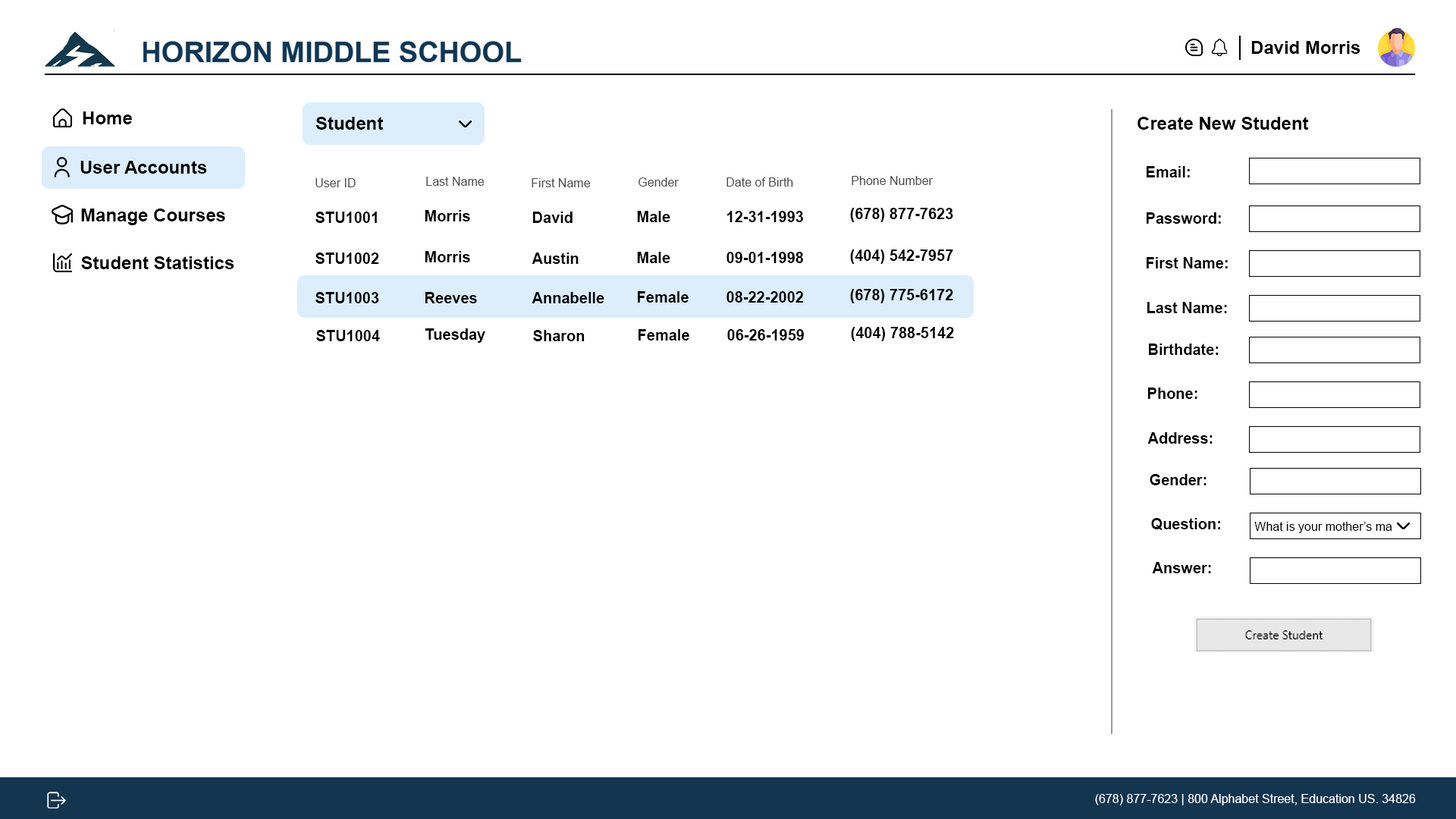
<style>
.page{position:relative;width:1456px;height:819px;background:#ffffff}
.page>*{position:absolute;margin:0}
.t1{font:18.2px "Arial-BoldMT";color:#000000}
.t2{font:18.2px "Arial-BoldMT";color:#010000}
.t3{font:15.2px "Arial-BoldMT";color:#000000}
.t4{font:12.1px "ArialMT";color:#4b4b4b}
.t5{font:12.1px "ArialMT";color:#000000}
.t6{font:12.1px "ArialMT";color:#ffffff}
</style>
<div class="page">
<p class="t1" style="left:1251px;top:41px;width:109px;height:13px">David Morris</p>
<p class="t1" style="left:83px;top:111px;width:49px;height:13px">Home</p>
<p class="t1" style="left:315px;top:117px;width:69px;height:13px">Student</p>
<p class="t1" style="left:1137px;top:117px;width:172px;height:13px">Create New Student</p>
<p class="t2" style="left:80px;top:161px;width:127px;height:13px">User Accounts</p>
<p class="t3" style="left:1147px;top:166px;width:43px;height:11px">Email:</p>
<p class="t4" style="left:315px;top:178px;width:41px;height:9px">User ID</p>
<p class="t4" style="left:426px;top:177px;width:59px;height:9px">Last Name</p>
<p class="t4" style="left:532px;top:178px;width:59px;height:9px">First Name</p>
<p class="t4" style="left:639px;top:177px;width:40px;height:10px">Gender</p>
<p class="t4" style="left:726px;top:177px;width:67px;height:10px">Date of Birth</p>
<p class="t4" style="left:852px;top:176px;width:81px;height:9px">Phone Number</p>
<p class="t1" style="left:81px;top:209px;width:144px;height:16px">Manage Courses</p>
<p class="t3" style="left:850px;top:208px;width:103px;height:14px">(678) 877-7623</p>
<p class="t3" style="left:315px;top:212px;width:62px;height:11px">STU1001</p>
<p class="t3" style="left:425px;top:210px;width:45px;height:11px">Morris</p>
<p class="t3" style="left:533px;top:212px;width:40px;height:11px">David</p>
<p class="t3" style="left:637px;top:211px;width:33px;height:11px">Male</p>
<p class="t3" style="left:727px;top:211px;width:76px;height:11px">12-31-1993</p>
<p class="t3" style="left:1147px;top:212px;width:74px;height:12px">Password:</p>
<p class="t1" style="left:81px;top:256px;width:153px;height:13px">Student Statistics</p>
<p class="t3" style="left:315px;top:253px;width:64px;height:11px">STU1002</p>
<p class="t3" style="left:425px;top:251px;width:45px;height:11px">Morris</p>
<p class="t3" style="left:532px;top:253px;width:47px;height:11px">Austin</p>
<p class="t3" style="left:637px;top:252px;width:33px;height:11px">Male</p>
<p class="t3" style="left:726px;top:252px;width:77px;height:11px">09-01-1998</p>
<p class="t3" style="left:850px;top:249px;width:103px;height:15px">(404) 542-7957</p>
<p class="t3" style="left:1147px;top:257px;width:81px;height:11px">First Name:</p>
<p class="t3" style="left:315px;top:292px;width:64px;height:11px">STU1003</p>
<p class="t3" style="left:425px;top:292px;width:52px;height:11px">Reeves</p>
<p class="t3" style="left:532px;top:292px;width:72px;height:11px">Annabelle</p>
<p class="t3" style="left:638px;top:291px;width:51px;height:12px">Female</p>
<p class="t3" style="left:726px;top:291px;width:77px;height:12px">08-22-2002</p>
<p class="t3" style="left:850px;top:289px;width:103px;height:14px">(678) 775-6172</p>
<p class="t3" style="left:1147px;top:302px;width:80px;height:11px">Last Name:</p>
<p class="t3" style="left:316px;top:330px;width:64px;height:11px">STU1004</p>
<p class="t3" style="left:425px;top:328px;width:60px;height:15px">Tuesday</p>
<p class="t3" style="left:533px;top:330px;width:52px;height:11px">Sharon</p>
<p class="t3" style="left:639px;top:329px;width:50px;height:11px">Female</p>
<p class="t3" style="left:727px;top:329px;width:77px;height:11px">06-26-1959</p>
<p class="t3" style="left:851px;top:327px;width:103px;height:14px">(404) 788-5142</p>
<p class="t3" style="left:1149px;top:344px;width:69px;height:11px">Birthdate:</p>
<p class="t3" style="left:1148px;top:388px;width:49px;height:11px">Phone:</p>
<p class="t3" style="left:1147px;top:432px;width:66px;height:12px">Address:</p>
<p class="t3" style="left:1150px;top:474px;width:56px;height:11px">Gender:</p>
<p class="t3" style="left:1151px;top:518px;width:69px;height:12px">Question:</p>
<p class="t5" style="left:1254px;top:522px;width:138px;height:11px">What is your mother’s ma</p>
<p class="t3" style="left:1152px;top:562px;width:59px;height:11px">Answer:</p>
<p class="t6" style="left:1095px;top:794px;width:321px;height:11px">(678) 877-7623 | 800 Alphabet Street, Education US. 34826</p>
</div>
